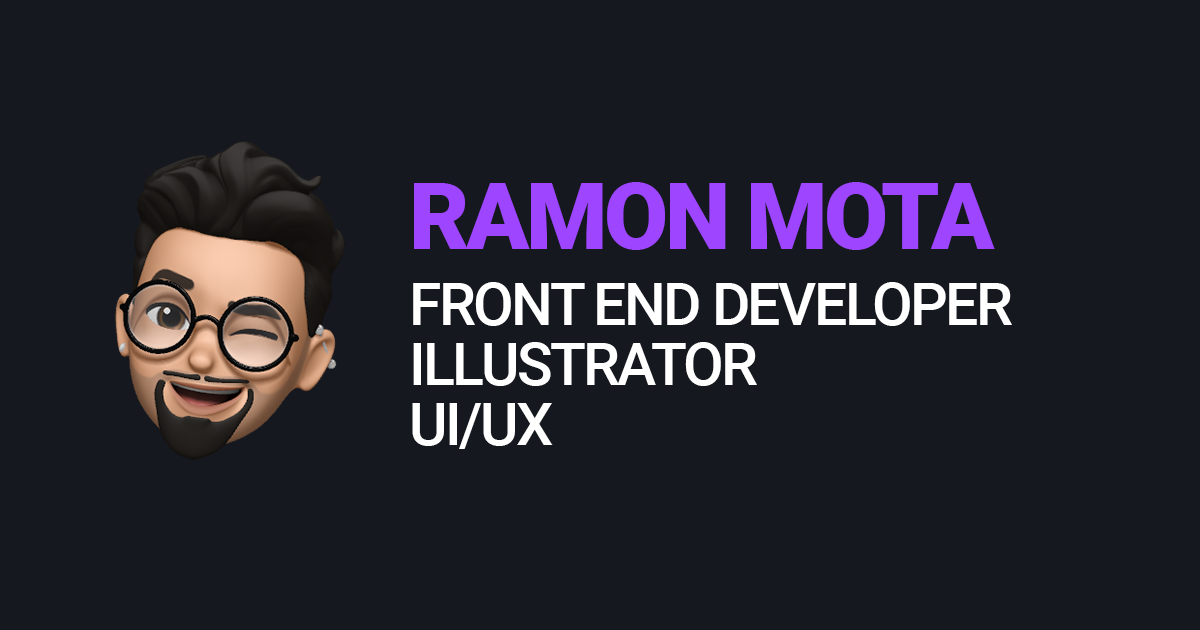
<style>
.page{position:relative;width:1200px;height:630px;background:#15191f}
.page>*{position:absolute;margin:0}
.t1{font:93.4px "Roboto-Black";letter-spacing:-0.04em;color:#9d45ff;text-transform:uppercase}
.t2{font:58.6px/30px "Roboto-Medium";letter-spacing:-0.04em;color:#ffffff;text-transform:uppercase}
</style>
<div class="page">
<p class="t1" style="left:414px;top:182px;width:581px;height:68px">Ramon Mota</p>
<p class="t2" style="left:412px;top:282px;width:600px;height:167px">FRONT END DEVELOPER<br><br>ILLUSTRATOR<br><br>UI/UX</p>
</div>
